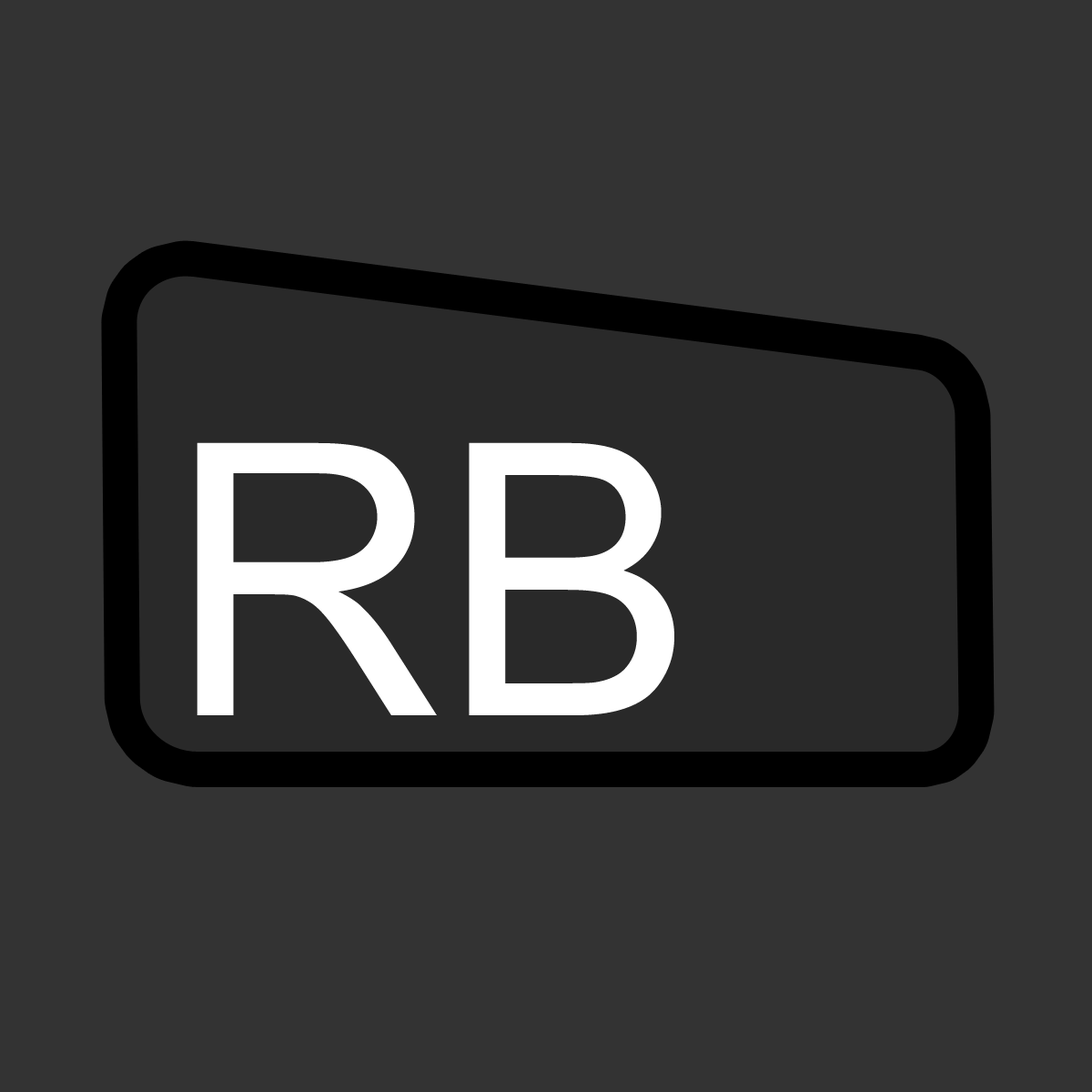
<style>
.page{position:relative;width:1092px;height:1092px;background:#333333}
.page>*{position:absolute;margin:0}
.t1{font:379.2px "ArialMT";color:#ffffff}
</style>
<div class="page">
<p class="t1" style="left:197px;top:442px;width:477px;height:273px">RB</p>
</div>
